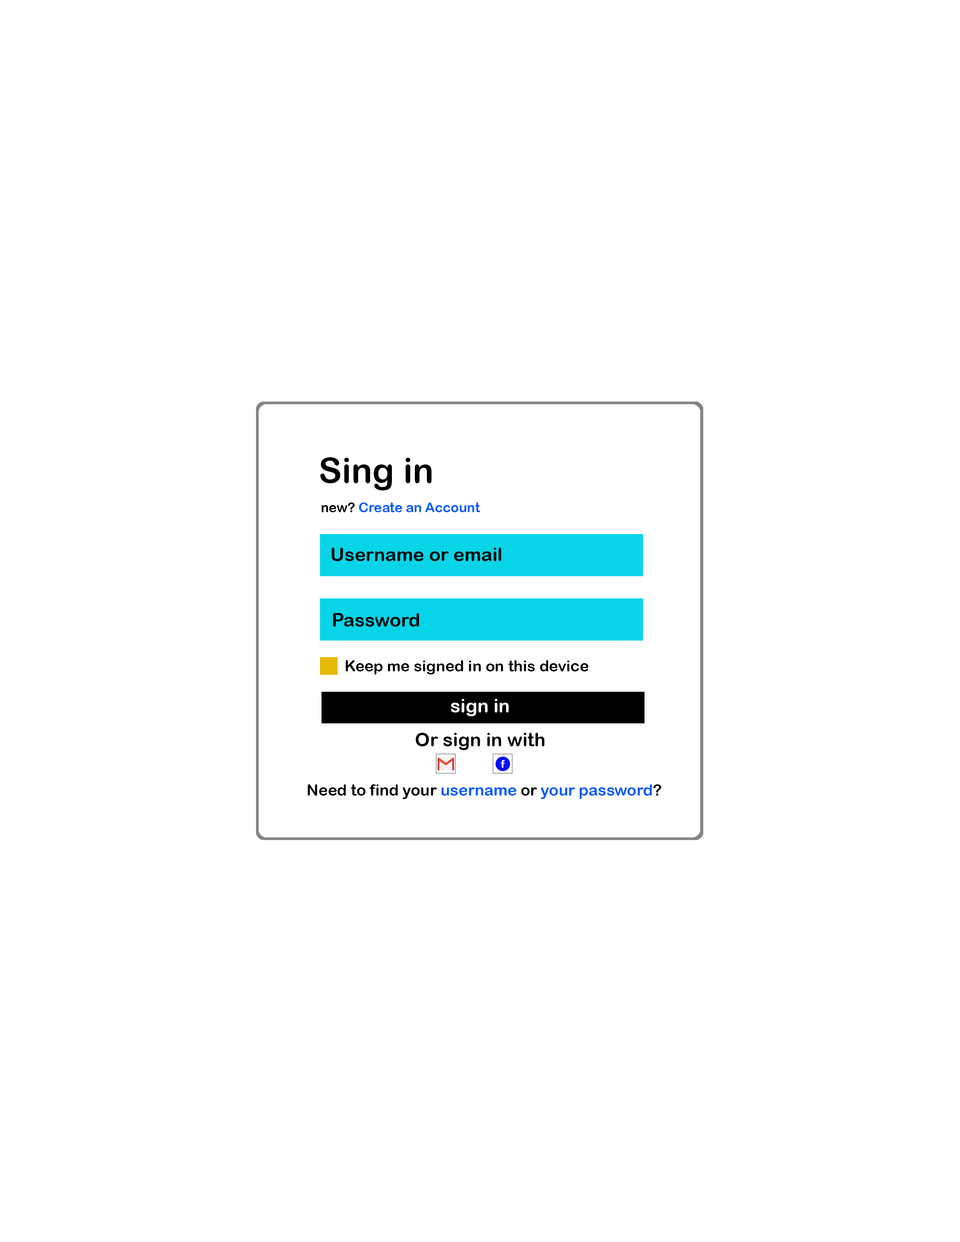
<style>
.page{position:relative;width:960px;height:1242px;background:#ffffff}
.page>*{position:absolute;margin:0}
.t1{font:35px "ArialRoundedMTBold";color:#000000}
.t2{font:13.4px "ArialRoundedMTBold";color:#005aff}
.t3{font:13.4px "ArialRoundedMTBold";color:#000000}
.t4{font:18.8px "ArialRoundedMTBold";color:#010101}
.t5{font:15.5px "ArialRoundedMTBold";color:#010101}
.t6{font:18.8px "ArialRoundedMTBold";color:#ffffff}
.t7{font:18.8px "ArialRoundedMTBold";color:#000000}
.t8{font:15.7px "ArialRoundedMTBold";color:#000000}
.t9{font:15.7px "ArialRoundedMTBold";color:#005aff}
</style>
<div class="page">
<p class="t1" style="left:320px;top:457px;width:112px;height:33px">Sing in</p>
<p class="t2" style="left:321px;top:503px;width:159px;height:9px"><span class="t3">new? </span>Create an Account</p>
<p class="t4" style="left:332px;top:548px;width:169px;height:13px">Username or email</p>
<p class="t4" style="left:333px;top:613px;width:86px;height:14px">Password</p>
<p class="t5" style="left:346px;top:660px;width:242px;height:15px">Keep me signed in on this device</p>
<p class="t6" style="left:451px;top:699px;width:58px;height:17px">sign in</p>
<p class="t7" style="left:416px;top:733px;width:128px;height:17px">Or sign in with</p>
<p class="t8" style="left:308px;top:784px;width:353px;height:15px">Need to find your <span class="t9">username</span> or <span class="t9">your password</span>?</p>
</div>
